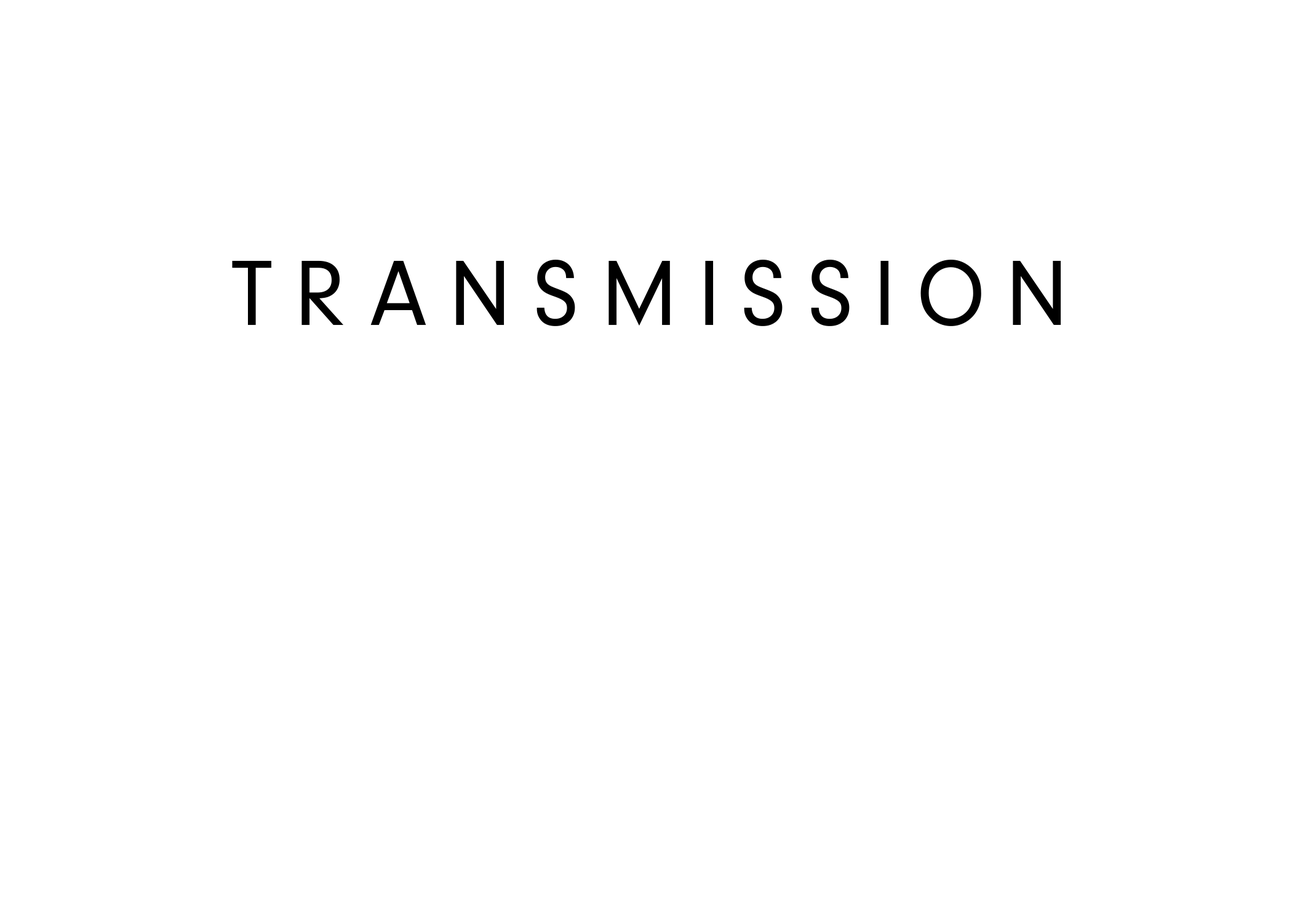
<style>
.page{position:relative;width:1292px;height:923px;background:#ffffff}
.page>*{position:absolute;margin:0}
.t1{font:96px "NeuzeitGroteskW01-Regular";letter-spacing:0.22em;color:#000000;scale:0.96 1}
.t2{font:96px "NeuzeitGroteskW01-Regular";letter-spacing:0.24em;color:#000000;scale:0.96 1}
</style>
<div class="page">
<p class="t1" style="left:232px;top:260px;width:829px;height:66px"><span class="t2">TRANS</span>MISSIO<span class="t2">N</span></p>
</div>
